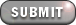
<style>
.page{position:relative;width:76px;height:25px}
.page>*{position:absolute;margin:0}
.t1{font:14px "FranklinGothic-Condensed";letter-spacing:0.1em;color:#ffffff}
</style>
<div class="page">
<p class="t1" style="left:11px;top:7px;width:52px;height:10px">SUBMIT</p>
</div>
